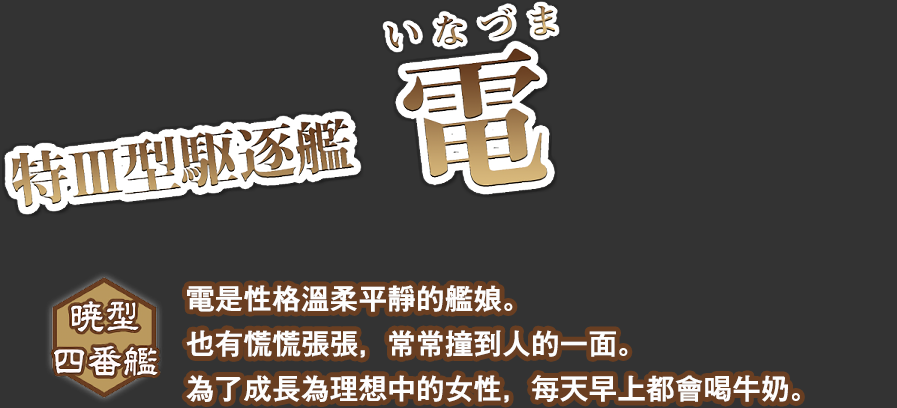
<style>
.page{position:relative;width:897px;height:408px;background:#333333}
.page>*{position:absolute;margin:0}
.t1{font:28px/45px "GothicMB101Pr6N-Medium";color:#fdfdfd;font-weight:bold}
</style>
<div class="page">
<p class="t1" style="left:186px;top:285px;width:614px;height:118px">電是性格溫柔平靜的艦娘。<br>也有慌慌張張，常常撞到人的一面。<br>為了成長為理想中的女性，每天早上都會喝牛奶。</p>
</div>
